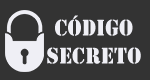
<style>
.page{position:relative;width:150px;height:80px;background:#333333}
.page>*{position:absolute;margin:0}
.t1{font:23.5px "Stencil";letter-spacing:0.01em;color:#efeff5;scale:0.94 1}
</style>
<div class="page">
<p class="t1" style="left:47px;top:15px;width:94px;height:49px;text-align:center">código<br>secreto</p>
</div>
